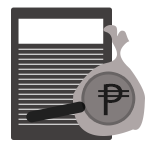
<style>
.page{position:relative;width:150px;height:150px;background:#ffffff}
.page>*{position:absolute;margin:0}
.t1{font:46.3px "MyriadPro-Regular";color:#070707}
</style>
<div class="page">
<p class="t1" style="left:103px;top:83px;width:20px;height:33px">P</p>
</div>
